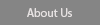
<style>
.page{position:relative;width:100px;height:25px;background:#858585}
.page>*{position:absolute;margin:0}
.t1{font:12px "MyriadPro-Regular";color:#e5e1e1}
</style>
<div class="page">
<p class="t1" style="left:27px;top:8px;width:45px;height:9px">About Us</p>
</div>
